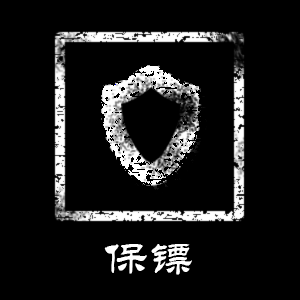
<style>
.page{position:relative;width:300px;height:300px;background:#000000}
.page>*{position:absolute;margin:0}
.t1{font:45.8px "STLiti";letter-spacing:0.01em;color:#ffffff}
</style>
<div class="page">
<p class="t1" style="left:104px;top:244px;width:88px;height:31px">保镖</p>
</div>
